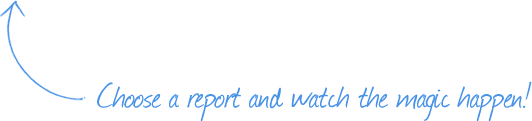
<style>
.page{position:relative;width:532px;height:121px;background:#ffffff}
.page>*{position:absolute;margin:0}
.t1{font:40px "Journal";color:#4993e7}
</style>
<div class="page">
<p class="t1" style="left:97px;top:81px;width:435px;height:40px">Choose a report and watch the magic happen!</p>
</div>
